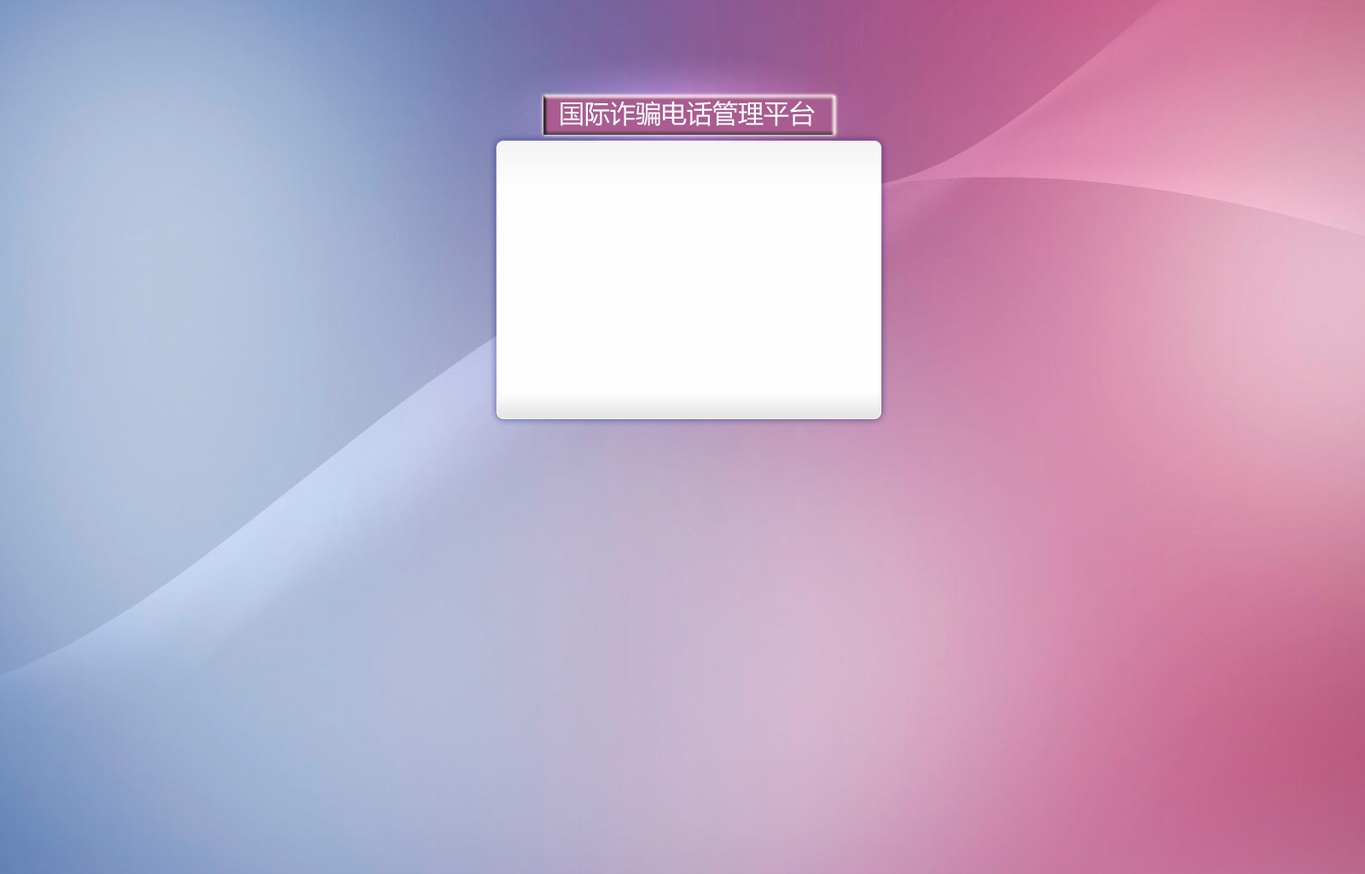
<style>
.page{position:relative;width:1365px;height:874px}
.page>*{position:absolute;margin:0}
.t1{font:25.6px "MicrosoftYaHei";color:#fefefe}
</style>
<div class="page">
<p class="t1" style="left:560px;top:101px;width:255px;height:25px">国际诈骗电话管理平台</p>
</div>
